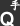
<style>
.page{position:relative;width:20px;height:26px;background:#333333}
.page>*{position:absolute;margin:0}
.t1{font:12px "DFKaiShu-SB-Estd-BF";color:#ffffff;font-weight:bold}
.t2{font:18px "ArialMT";color:#ffffff;font-weight:bold}
</style>
<div class="page">
<p class="t1" style="left:10px;top:0px;width:10px;height:11px">手</p>
<p class="t2" style="left:0px;top:11px;width:14px;height:16px">Q</p>
</div>
